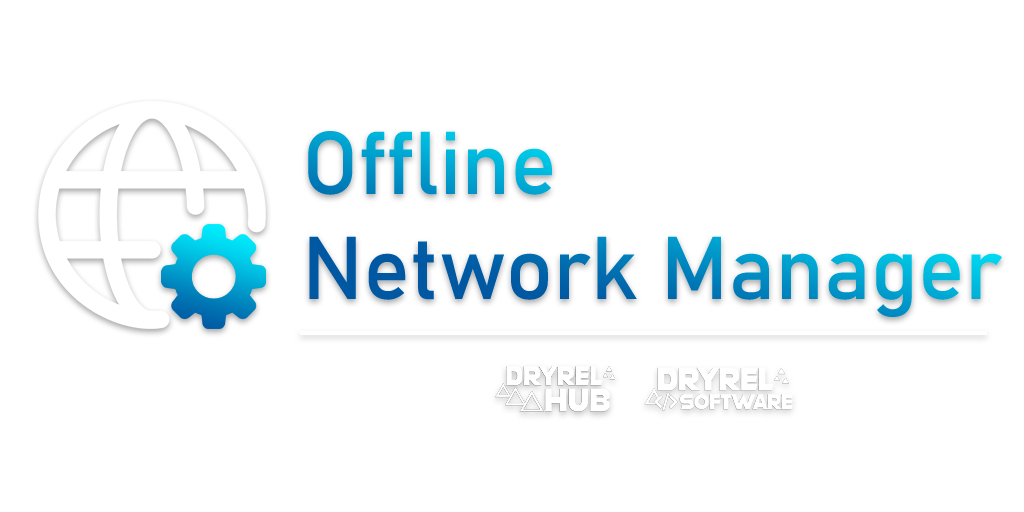
<style>
.page{position:relative;width:1024px;height:512px;background:#ffffff}
.page>*{position:absolute;margin:0}
.t1{font:87.5px "Bahnschrift"}
</style>
<div class="page">
<p class="t1" style="left:308px;top:131px;width:694px;height:186px">Offline <br>Network Manager</p>
</div>
